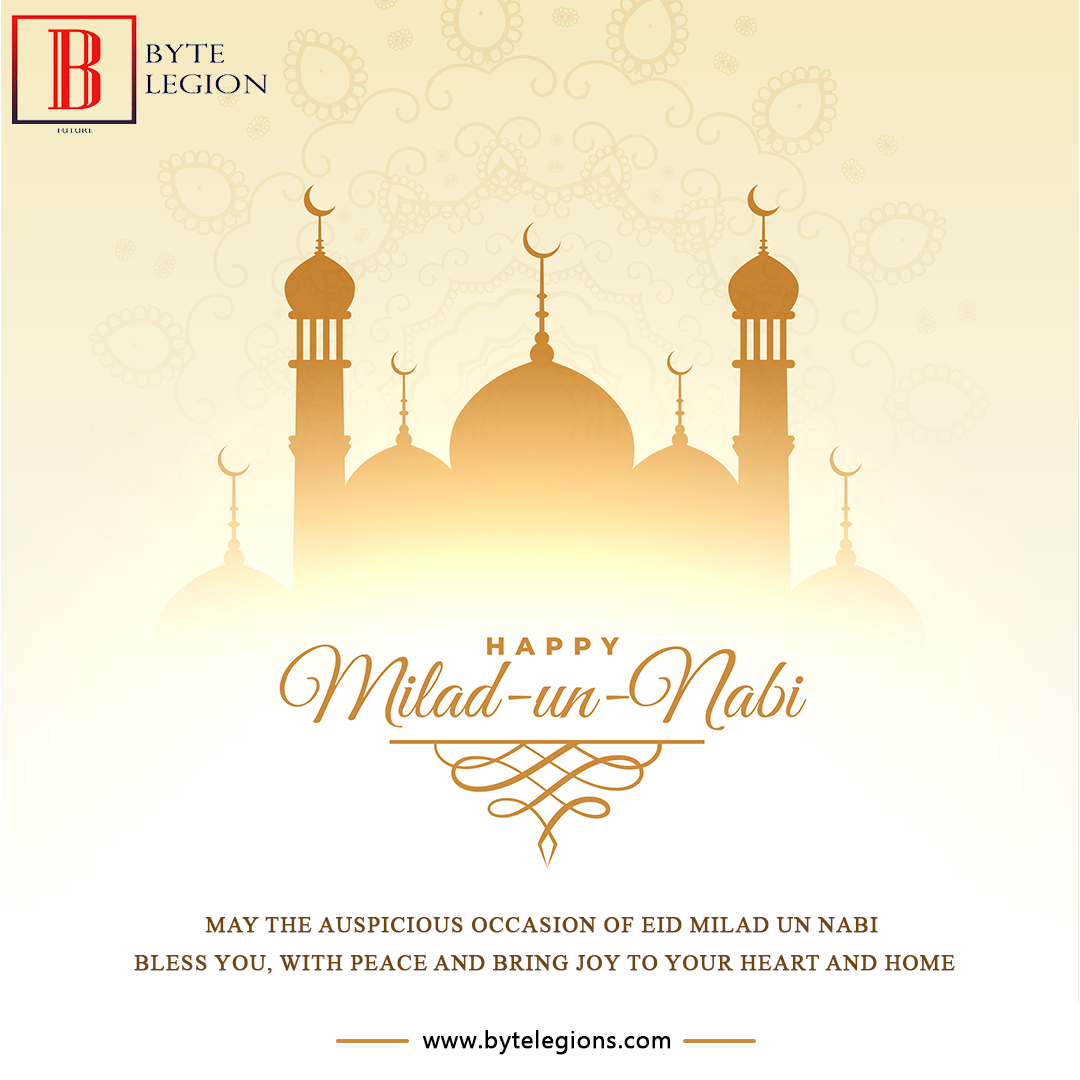
<style>
.page{position:relative;width:1080px;height:1080px;background:#ffffff}
.page>*{position:absolute;margin:0}
.t1{font:22px/38px "TimesNewRomanPSMT";letter-spacing:0.015em;color:#72440b;text-transform:uppercase;font-weight:bold}
.t2{font:24px "MyanmarText";letter-spacing:0.015em;color:#000000;font-weight:bold}
</style>
<div class="page">
<p class="t1" style="left:134px;top:917px;width:821px;height:57px;text-align:center">May the auspicious occasion of Eid Milad un Nabi <br>bless you, with peace and bring joy to your heart and home</p>
<p class="t2" style="left:422px;top:1030px;width:249px;height:25px">www.bytelegions.com</p>
</div>
